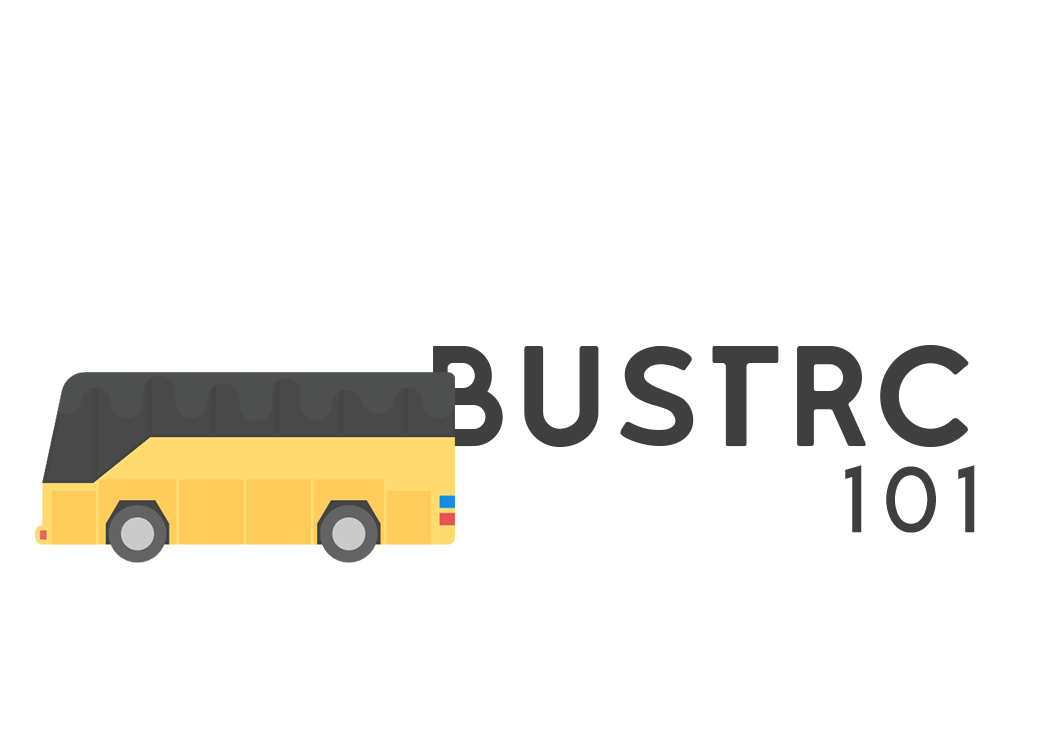
<style>
.page{position:relative;width:1045px;height:738px;background:#ffffff}
.page>*{position:absolute;margin:0}
.t1{font:141.8px "LEIXO-DEMO";color:#3f3f3f}
.t2{font:90.1px "LemonMilklight";letter-spacing:0.2em;color:#3f3f3f}
</style>
<div class="page">
<p class="t1" style="left:433px;top:345px;width:536px;height:102px">BusTrc</p>
<p class="t2" style="left:845px;top:465px;width:130px;height:68px">101</p>
</div>
